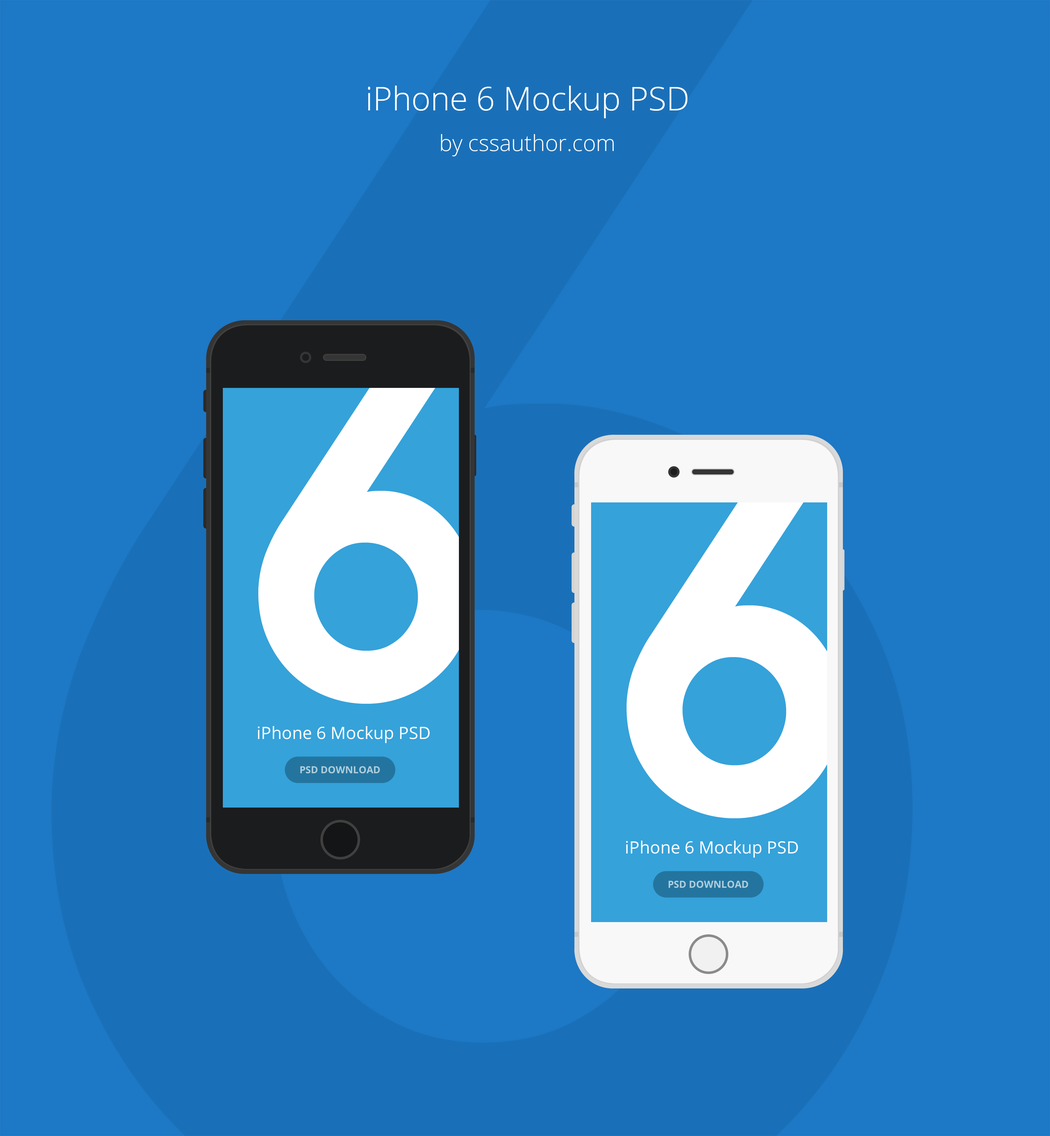
<style>
.page{position:relative;width:1050px;height:1136px;background:#1d78c5}
.page>*{position:absolute;margin:0}
.t1{font:32.7px "OpenSans-Light";color:#ffffff}
.t2{font:22.2px/40.6px "OpenSans-Light";color:#ffffff}
</style>
<div class="page">
<p class="t1" style="left:368px;top:86px;width:319px;height:70px;text-align:center">iPhone 6 Mockup PSD<br><span class="t2">by cssauthor.com</span></p>
</div>
